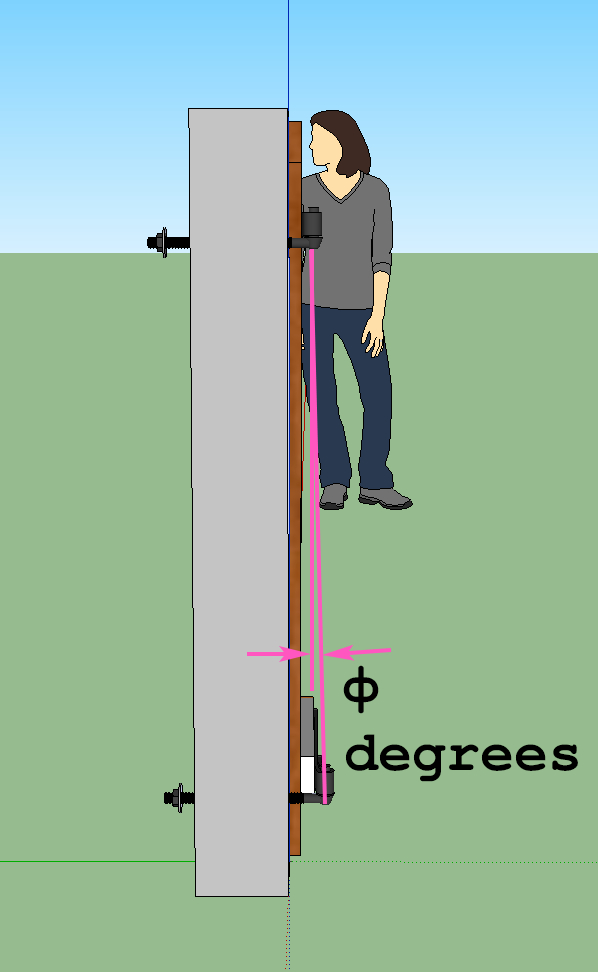
<style>
.page{position:relative;width:598px;height:972px;background:#96bb8f}
.page>*{position:absolute;margin:0}
.t1{font:56.7px "FreeMonoBold";color:#000000}
</style>
<div class="page">
<p class="t1" style="left:343px;top:665px;width:235px;height:117px">ϕ<br>degrees</p>
</div>
